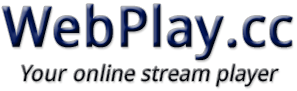
<style>
.page{position:relative;width:297px;height:91px;background:#ffffff}
.page>*{position:absolute;margin:0}
.t1{font:22px/35px "DroidSans";font-style:italic}
.t2{font:55px/35px "DroidSans";font-weight:bold}
.t3{font:22px/35px "DroidSans";letter-spacing:0.02em;font-style:italic}
</style>
<div class="page">
<p class="t1" style="left:2px;top:4px;width:291px;height:83px;text-align:center"><span class="t2">WebPlay.cc<br></span><span class="t3">Your on</span>line stream player</p>
</div>
